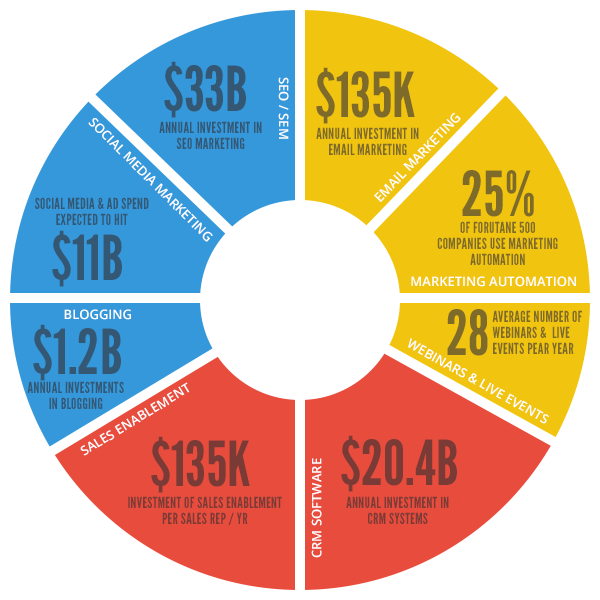
<style>
.page{position:relative;width:600px;height:600px;background:#ffffff}
.page>*{position:absolute;margin:0}
.t1{font:62px "LeagueGothic";color:#345874;text-transform:uppercase}
.t2{font:13px "OpenSans-Semibold";color:#ffffff;text-transform:uppercase}
.t3{font:62px "LeagueGothic";color:#7e6b2a;text-transform:uppercase}
.t4{font:15px/16px "LeagueGothic";letter-spacing:0.02em;color:#345874;text-transform:uppercase}
.t5{font:15px/16px "LeagueGothic";letter-spacing:0.02em;color:#7e6b2a;text-transform:uppercase}
.t6{font:62px "LeagueGothic";color:#7a3b36;text-transform:uppercase}
.t7{font:15px/16px "LeagueGothic";letter-spacing:0.02em;color:#7a3b36;text-transform:uppercase}
</style>
<div class="page">
<p class="t1" style="left:164px;top:61px;width:82px;height:57px">$33b</p>
<p class="t2" style="left:278px;top:77px;width:11px;height:62px;rotate:90deg">seo / sem</p>
<p class="t3" style="left:316px;top:67px;width:99px;height:57px">$135k</p>
<p class="t2" style="left:374px;top:112px;width:87px;height:90px;rotate:-46deg">email marketing</p>
<p class="t2" style="left:88px;top:118px;width:125px;height:124px;rotate:45deg">social media marketing</p>
<p class="t4" style="left:159px;top:121px;width:103px;height:28px;text-align:center">ANNUAL INVESTMENT IN  <br>SEO MARKETING</p>
<p class="t5" style="left:316px;top:127px;width:103px;height:28px;text-align:center">ANNUAL INVESTMENT IN  <br>EMAIL MARKETING</p>
<p class="t3" style="left:462px;top:170px;width:72px;height:47px">25%</p>
<p class="t4" style="left:35px;top:197px;width:114px;height:28px;text-align:center">SOCIAL MEDIA &amp; AD SPEND <br>EXPECTED TO HIT</p>
<p class="t5" style="left:437px;top:221px;width:121px;height:44px;text-align:center">of forutane 500 companies use MARKETING AUTOMATION</p>
<p class="t1" style="left:52px;top:230px;width:70px;height:57px">$11b</p>
<p class="t2" style="left:411px;top:276px;width:165px;height:11px">marketing automation</p>
<p class="t2" style="left:64px;top:309px;width:67px;height:11px">blogging</p>
<p class="t3" style="left:447px;top:309px;width:41px;height:47px">28</p>
<p class="t5" style="left:492px;top:310px;width:90px;height:44px">AVERAGE NUMBER OF WEBINARS &amp;  LIVE<br>EVENTS PEAR YEAR</p>
<p class="t1" style="left:33px;top:324px;width:88px;height:57px">$1.2b</p>
<p class="t2" style="left:408px;top:338px;width:141px;height:86px;rotate:29deg">webinars &amp; live events</p>
<p class="t4" style="left:27px;top:381px;width:97px;height:28px;text-align:center">ANNUAL INVESTMENTS <br>IN BLOGGING</p>
<p class="t2" style="left:80px;top:382px;width:110px;height:74px;rotate:-31deg">sales enablement</p>
<p class="t6" style="left:151px;top:436px;width:99px;height:57px">$135k</p>
<p class="t6" style="left:341px;top:435px;width:116px;height:57px">$20.4b</p>
<p class="t2" style="left:311px;top:458px;width:11px;height:100px;rotate:-90deg">crm software</p>
<p class="t7" style="left:128px;top:496px;width:154px;height:29px;text-align:center">INVESTMENT OF SALES ENABLEMENT <br>PER SALES REP / YR</p>
<p class="t7" style="left:346px;top:496px;width:103px;height:28px;text-align:center">ANNUAL INVESTMENT IN  <br>CRM SYSTEMS</p>
</div>
